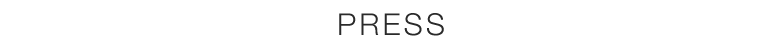
<style>
.page{position:relative;width:784px;height:47px;background:#ffffff}
.page>*{position:absolute;margin:0}
.t1{font:30px "HelveticaNeue-Light";letter-spacing:0.11em;color:#2a2a2a}
</style>
<div class="page">
<p class="t1" style="left:339px;top:13px;width:105px;height:23px">PRESS</p>
</div>
